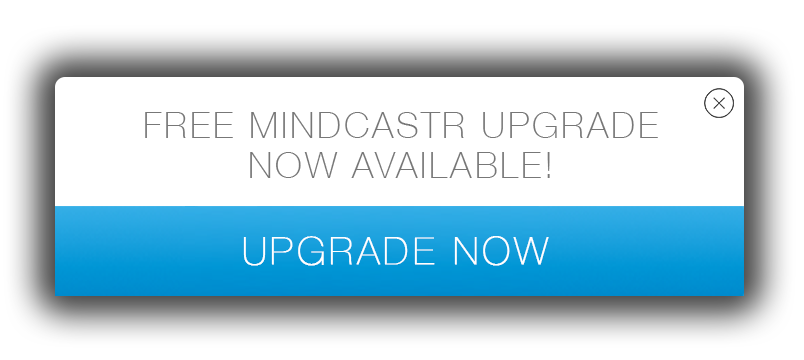
<style>
.page{position:relative;width:804px;height:360px;background:#ffffff}
.page>*{position:absolute;margin:0}
.t1{font:36px/40px "HelveticaNeue-Thin";letter-spacing:0.08em;color:#777777}
.t2{font:37.8px "HelveticaNeue-UltraLight";letter-spacing:0.1em;color:#ffffff;font-weight:bold}
</style>
<div class="page">
<p class="t1" style="left:145px;top:112px;width:513px;height:66px;text-align:center">FREE MINDCASTR UPGRADE <br>NOW AVAILABLE!</p>
<p class="t2" style="left:243px;top:236px;width:306px;height:30px">UPGRADE NOW</p>
</div>
